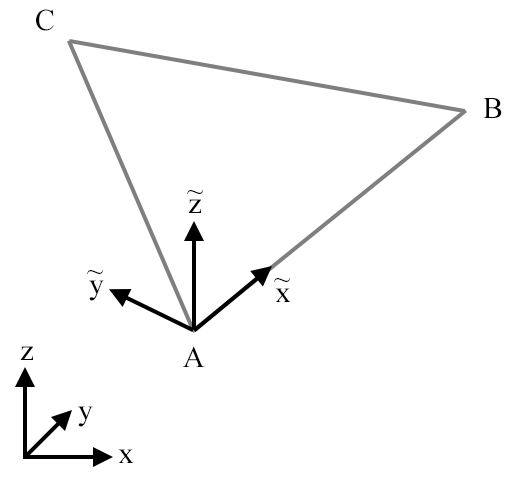
<style>
.page{position:relative;width:514px;height:478px;background:#ffffff}
.page>*{position:absolute;margin:0}
.t1{font:30px "TimesNewRomanPSMT";letter-spacing:-0.04em;color:#000000}
</style>
<div class="page">
<p class="t1" style="left:36px;top:9px;width:18px;height:22px">C</p>
<p class="t1" style="left:483px;top:98px;width:19px;height:20px">B</p>
<p class="t1" style="left:187px;top:190px;width:16px;height:4px">~</p>
<p class="t1" style="left:188px;top:199px;width:13px;height:14px">z</p>
<p class="t1" style="left:87px;top:270px;width:16px;height:4px">~</p>
<p class="t1" style="left:89px;top:280px;width:15px;height:21px">y</p>
<p class="t1" style="left:274px;top:278px;width:16px;height:4px">~</p>
<p class="t1" style="left:275px;top:288px;width:16px;height:14px">x</p>
<p class="t1" style="left:20px;top:346px;width:13px;height:14px">z</p>
<p class="t1" style="left:183px;top:346px;width:22px;height:21px">A</p>
<p class="t1" style="left:78px;top:406px;width:15px;height:21px">y</p>
<p class="t1" style="left:118px;top:449px;width:16px;height:14px">x</p>
</div>
